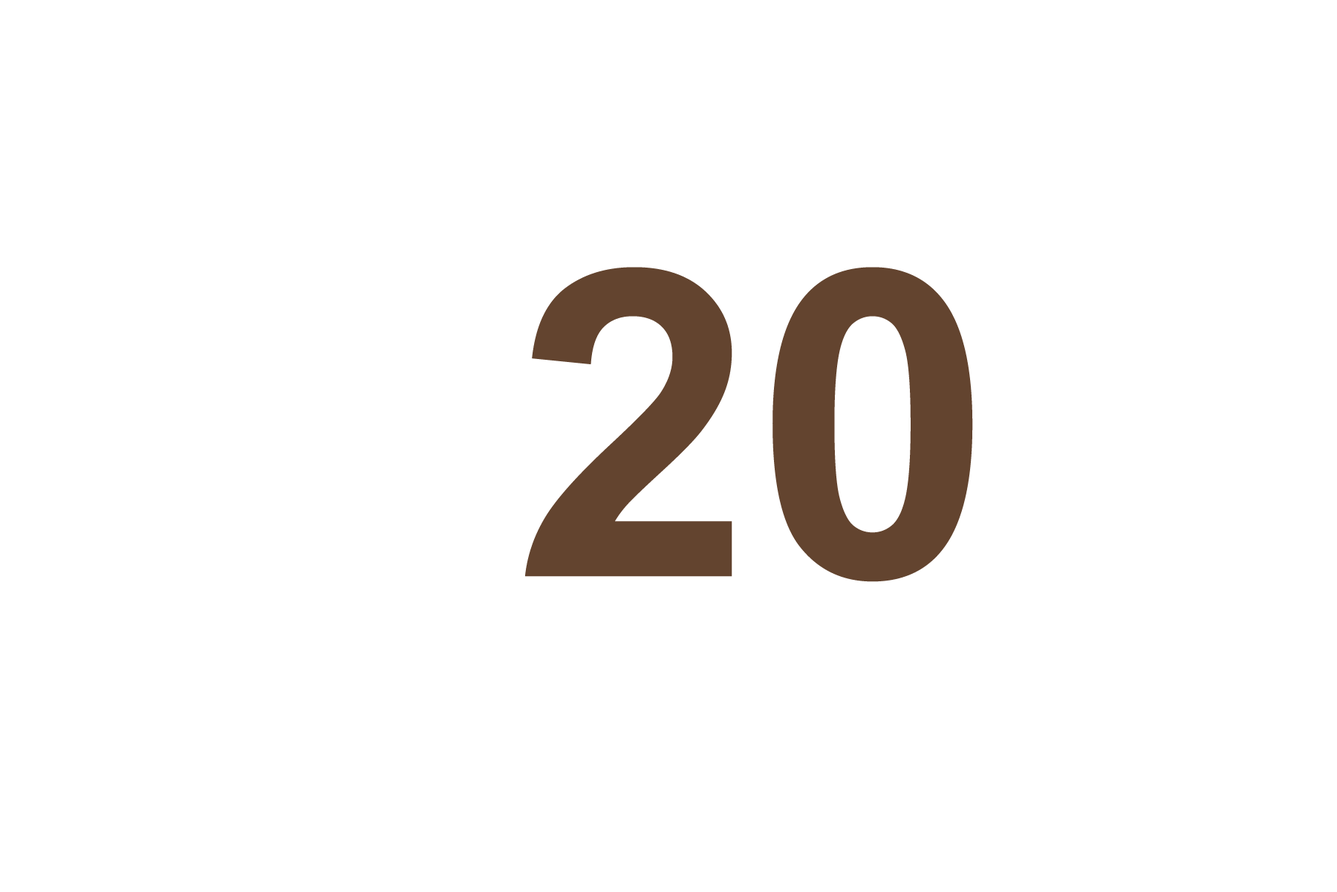
<style>
.page{position:relative;width:1337px;height:892px;background:#ffffff}
.page>*{position:absolute;margin:0}
.t1{font:429.6px "Arial-BoldMT";color:#63442f}
</style>
<div class="page">
<p class="t1" style="left:525px;top:267px;width:448px;height:315px">20</p>
</div>
